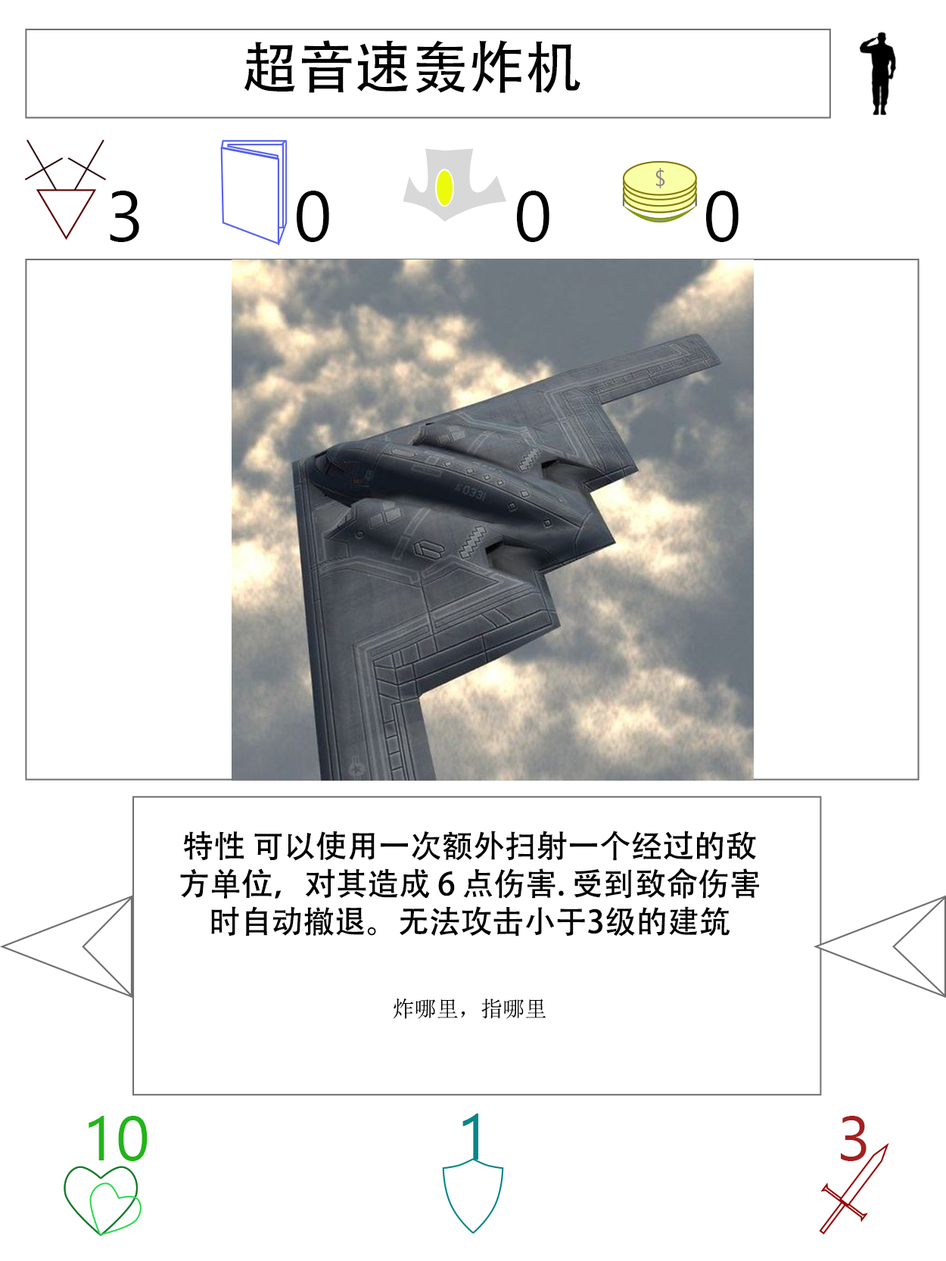
<style>
.page{position:relative;width:946px;height:1261px;background:#ffffff}
.page>*{position:absolute;margin:0}
.t1{font:56.7px "AdobeHeitiStd-Regular";color:#000000}
.t2{font:70.9px "SegoeUI";color:#000000}
.t3{font:31.5px "AdobeHeitiStd-Regular";color:#000000}
.t4{font:22.1px "NSimSun";color:#000000}
.t5{font:63px "SegoeUI";color:#22b518}
.t6{font:64.6px "SegoeUI";color:#05868a}
.t7{font:63px "SegoeUI";color:#a32020}
</style>
<div class="page">
<p class="t1" style="left:244px;top:40px;width:336px;height:53px">超音速轰炸机</p>
<p class="t2" style="left:110px;top:191px;width:29px;height:51px">3</p>
<p class="t2" style="left:297px;top:191px;width:32px;height:51px">0</p>
<p class="t2" style="left:517px;top:191px;width:32px;height:51px">0</p>
<p class="t2" style="left:706px;top:191px;width:32px;height:51px">0</p>
<p class="t3" style="left:180px;top:831px;width:579px;height:188px;text-align:center">特性 可以使用一次额外扫射一个经过的敌方单位，对其造成 6 点伤害. 受到致命伤害时自动撤退。无法攻击小于3级的建筑<br><br><span class="t4">炸哪里，指哪里</span></p>
<p class="t5" style="left:89px;top:1116px;width:59px;height:45px">10</p>
<p class="t6" style="left:462px;top:1114px;width:16px;height:46px">1</p>
<p class="t7" style="left:840px;top:1116px;width:26px;height:45px">3</p>
</div>
